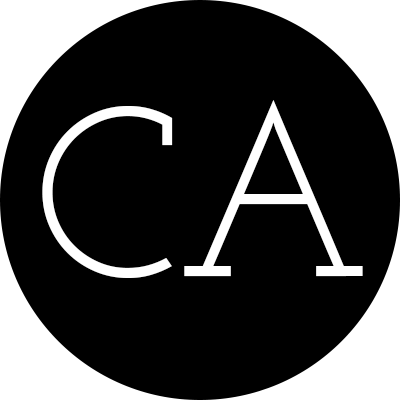
<style>
.page{position:relative;width:400px;height:400px;background:#000000}
.page>*{position:absolute;margin:0}
.t1{font:240.4px "JosefinSlab";color:#ffffff}
</style>
<div class="page">
<p class="t1" style="left:42px;top:100px;width:321px;height:178px">CA</p>
</div>
